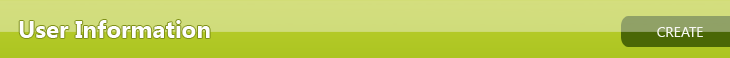
<style>
.page{position:relative;width:730px;height:58px}
.page>*{position:absolute;margin:0}
.t1{font:24px "SegoeUI-Bold";color:#fefefe}
.t2{font:14px "SegoeUI";color:#f6f7f1}
</style>
<div class="page">
<p class="t1" style="left:19px;top:20px;width:191px;height:18px">User Information</p>
<p class="t2" style="left:657px;top:27px;width:46px;height:10px">CREATE</p>
</div>
